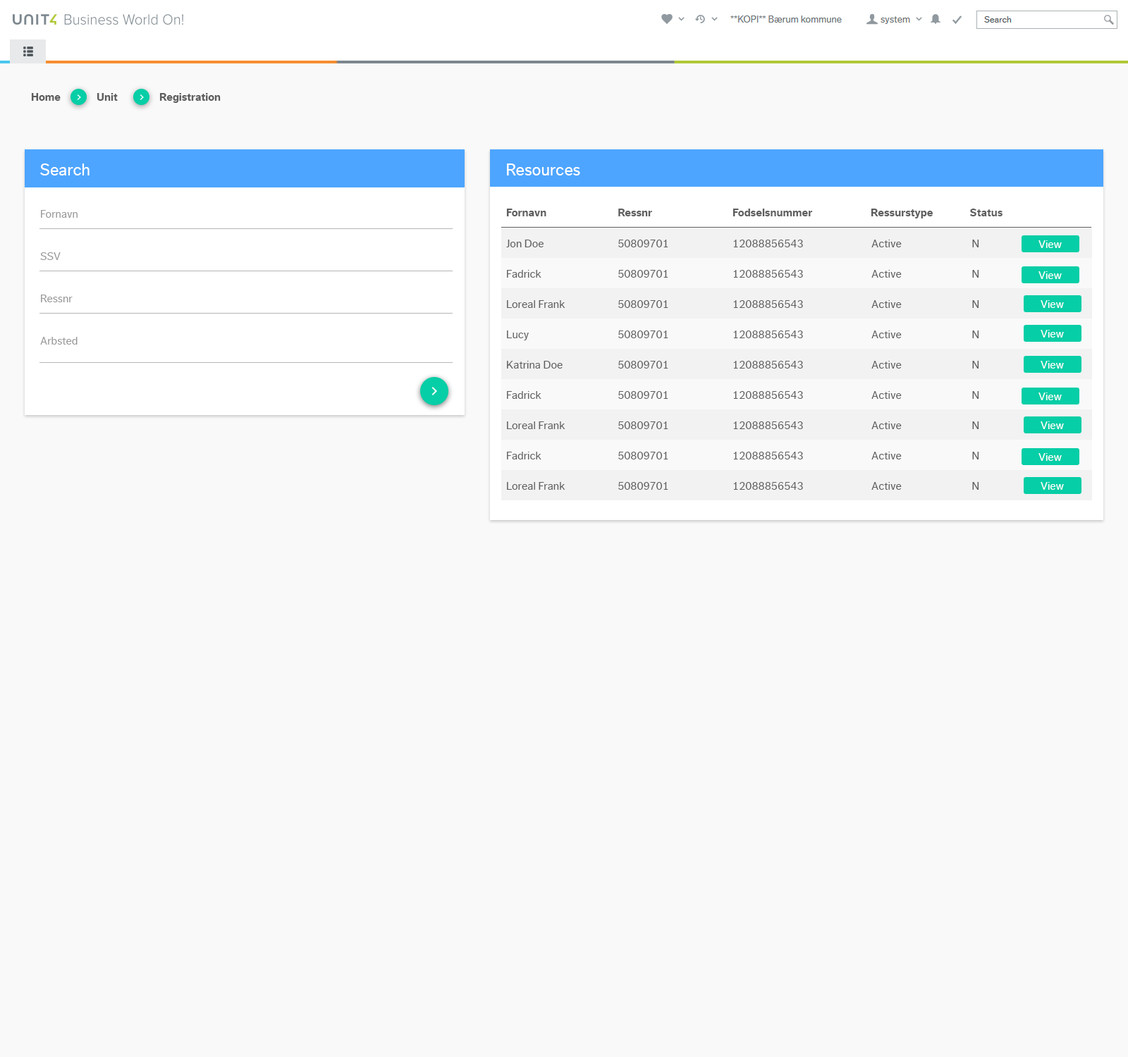
<style>
.page{position:relative;width:1128px;height:1057px;background:#f9f9f9}
.page>*{position:absolute;margin:0}
.t1{font:11.3px "DagnyCompPro-Bold";color:#5e5e5e}
.t2{font:16.9px "DagnyCompPro";color:#ffffff}
.t3{font:11.3px "DagnyCompPro";color:#989898}
.t4{font:11.3px "DagnyCompPro";color:#5e5e5e}
.t5{font:11.3px "DagnyCompPro";color:#ffffff}
</style>
<div class="page">
<p class="t1" style="left:31px;top:93px;width:30px;height:8px">Home</p>
<p class="t1" style="left:97px;top:93px;width:21px;height:8px">Unit</p>
<p class="t1" style="left:159px;top:93px;width:62px;height:10px">Registration</p>
<p class="t2" style="left:40px;top:164px;width:50px;height:12px">Search</p>
<p class="t2" style="left:507px;top:164px;width:73px;height:12px">Resources</p>
<p class="t1" style="left:506px;top:209px;width:40px;height:7px">Fornavn</p>
<p class="t1" style="left:618px;top:209px;width:34px;height:7px">Ressnr</p>
<p class="t1" style="left:732px;top:209px;width:81px;height:7px">Fodselsnummer</p>
<p class="t1" style="left:871px;top:209px;width:62px;height:10px">Ressurstype</p>
<p class="t1" style="left:969px;top:209px;width:33px;height:7px">Status</p>
<p class="t3" style="left:41px;top:210px;width:37px;height:8px">Fornavn</p>
<p class="t4" style="left:506px;top:240px;width:37px;height:7px">Jon Doe</p>
<p class="t4" style="left:618px;top:240px;width:50px;height:7px">50809701</p>
<p class="t4" style="left:733px;top:240px;width:70px;height:7px">12088856543</p>
<p class="t4" style="left:871px;top:240px;width:31px;height:7px">Active</p>
<p class="t4" style="left:972px;top:240px;width:7px;height:7px">N</p>
<p class="t5" style="left:1038px;top:240px;width:24px;height:8px">View</p>
<p class="t3" style="left:40px;top:252px;width:21px;height:8px">SSV</p>
<p class="t4" style="left:507px;top:270px;width:34px;height:8px">Fadrick</p>
<p class="t4" style="left:618px;top:270px;width:50px;height:8px">50809701</p>
<p class="t4" style="left:733px;top:270px;width:70px;height:8px">12088856543</p>
<p class="t4" style="left:871px;top:270px;width:31px;height:8px">Active</p>
<p class="t4" style="left:972px;top:270px;width:7px;height:8px">N</p>
<p class="t5" style="left:1038px;top:271px;width:24px;height:8px">View</p>
<p class="t3" style="left:41px;top:295px;width:32px;height:7px">Ressnr</p>
<p class="t4" style="left:507px;top:300px;width:58px;height:8px">Loreal Frank</p>
<p class="t4" style="left:618px;top:300px;width:50px;height:8px">50809701</p>
<p class="t4" style="left:733px;top:300px;width:70px;height:8px">12088856543</p>
<p class="t4" style="left:871px;top:300px;width:31px;height:8px">Active</p>
<p class="t4" style="left:972px;top:300px;width:7px;height:8px">N</p>
<p class="t5" style="left:1040px;top:300px;width:24px;height:8px">View</p>
<p class="t5" style="left:1040px;top:330px;width:24px;height:8px">View</p>
<p class="t3" style="left:40px;top:337px;width:38px;height:8px">Arbsted</p>
<p class="t4" style="left:507px;top:331px;width:22px;height:9px">Lucy</p>
<p class="t4" style="left:618px;top:331px;width:50px;height:7px">50809701</p>
<p class="t4" style="left:733px;top:331px;width:70px;height:7px">12088856543</p>
<p class="t4" style="left:871px;top:331px;width:31px;height:7px">Active</p>
<p class="t4" style="left:972px;top:331px;width:7px;height:7px">N</p>
<p class="t4" style="left:507px;top:361px;width:55px;height:8px">Katrina Doe</p>
<p class="t4" style="left:618px;top:361px;width:50px;height:8px">50809701</p>
<p class="t4" style="left:733px;top:361px;width:70px;height:8px">12088856543</p>
<p class="t4" style="left:871px;top:361px;width:31px;height:8px">Active</p>
<p class="t4" style="left:972px;top:361px;width:7px;height:8px">N</p>
<p class="t5" style="left:1040px;top:361px;width:24px;height:8px">View</p>
<p class="t4" style="left:507px;top:391px;width:34px;height:8px">Fadrick</p>
<p class="t4" style="left:618px;top:391px;width:50px;height:8px">50809701</p>
<p class="t4" style="left:733px;top:391px;width:70px;height:8px">12088856543</p>
<p class="t4" style="left:871px;top:391px;width:31px;height:8px">Active</p>
<p class="t4" style="left:972px;top:391px;width:7px;height:8px">N</p>
<p class="t5" style="left:1038px;top:393px;width:24px;height:7px">View</p>
<p class="t4" style="left:507px;top:422px;width:58px;height:7px">Loreal Frank</p>
<p class="t4" style="left:618px;top:422px;width:50px;height:7px">50809701</p>
<p class="t4" style="left:733px;top:422px;width:70px;height:7px">12088856543</p>
<p class="t4" style="left:871px;top:422px;width:31px;height:7px">Active</p>
<p class="t4" style="left:972px;top:422px;width:7px;height:7px">N</p>
<p class="t5" style="left:1040px;top:422px;width:24px;height:7px">View</p>
<p class="t4" style="left:507px;top:452px;width:34px;height:8px">Fadrick</p>
<p class="t4" style="left:618px;top:452px;width:50px;height:8px">50809701</p>
<p class="t4" style="left:733px;top:452px;width:70px;height:8px">12088856543</p>
<p class="t4" style="left:871px;top:452px;width:31px;height:8px">Active</p>
<p class="t4" style="left:972px;top:452px;width:7px;height:8px">N</p>
<p class="t5" style="left:1038px;top:453px;width:24px;height:8px">View</p>
<p class="t4" style="left:507px;top:482px;width:58px;height:8px">Loreal Frank</p>
<p class="t4" style="left:618px;top:482px;width:50px;height:8px">50809701</p>
<p class="t4" style="left:733px;top:482px;width:70px;height:8px">12088856543</p>
<p class="t4" style="left:871px;top:482px;width:31px;height:8px">Active</p>
<p class="t4" style="left:972px;top:482px;width:7px;height:8px">N</p>
<p class="t5" style="left:1040px;top:482px;width:24px;height:8px">View</p>
</div>
